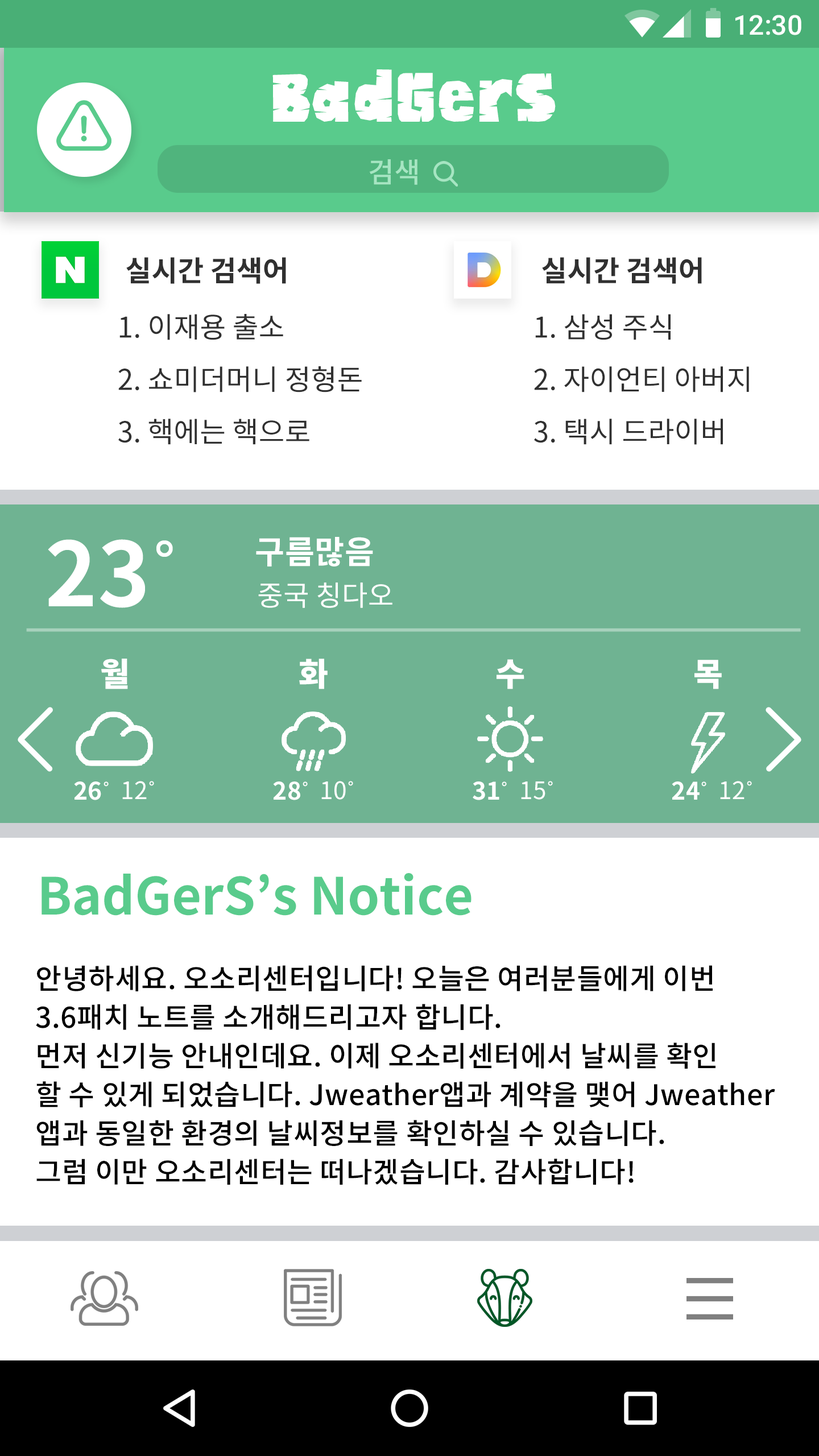
<style>
.page{position:relative;width:819px;height:1456px;background:#ffffff}
.page>*{position:absolute;margin:0}
.t1{font:27.3px "Roboto-Medium";color:#ffffff}
.t2{font:51.2px "CUTE_ANIMAL";color:#ffffff}
.t3{font:28.2px "NotoSansCJKkr-Medium";color:#a6e5c2}
.t4{font:28.4px "NotoSansCJKkr-Bold";color:#303030}
.t5{font:28.4px "NotoSansCJKkr-Regular";color:#303030}
.t6{font:88.5px "NotoSansCJKkr-Bold";letter-spacing:0.01em;color:#ffffff}
.t7{font:88.5px "Gulim";letter-spacing:0.01em;color:#ffffff}
.t8{font:32.2px "NotoSansCJKkr-Bold";letter-spacing:0.01em;color:#ffffff}
.t9{font:28.1px "NotoSansCJKkr-Regular";letter-spacing:0.01em;color:#ffffff}
.t10{font:32.2px "NotoSansCJKkr-Black";letter-spacing:0.01em;color:#ffffff}
.t11{font:24.1px "NotoSansCJKkr-Bold";letter-spacing:0.01em;color:#ffffff}
.t12{font:24.1px "Gulim";letter-spacing:0.01em;color:#ffffff}
.t13{font:24.1px "NotoSansCJKkr-Regular";letter-spacing:0.01em;color:#ffffff}
.t14{font:51.2px "NotoSansCJKkr-Bold";color:#59cb8c}
.t15{font:28.4px/38.7px "NotoSansCJKkr-Medium";letter-spacing:0.01em;color:#000000}
</style>
<div class="page">
<p class="t1" style="left:735px;top:15px;width:66px;height:20px">12:30</p>
<p class="t2" style="left:272px;top:69px;width:284px;height:53px">BadGerS</p>
<p class="t3" style="left:369px;top:159px;width:48px;height:26px">검색</p>
<p class="t4" style="left:126px;top:257px;width:160px;height:27px">실시간 검색어</p>
<p class="t4" style="left:542px;top:257px;width:160px;height:27px">실시간 검색어</p>
<p class="t5" style="left:119px;top:314px;width:164px;height:26px">1. 이재용 출소</p>
<p class="t5" style="left:535px;top:314px;width:136px;height:26px">1. 삼성 주식</p>
<p class="t5" style="left:118px;top:366px;width:244px;height:26px">2. 쇼미더머니 정형돈</p>
<p class="t5" style="left:534px;top:366px;width:215px;height:26px">2. 자이언티 아버지</p>
<p class="t5" style="left:118px;top:419px;width:191px;height:26px">3. 핵에는 핵으로</p>
<p class="t5" style="left:534px;top:419px;width:189px;height:26px">3. 택시 드라이버</p>
<p class="t6" style="left:48px;top:539px;width:125px;height:69px">23<span class="t7">˚</span></p>
<p class="t8" style="left:256px;top:537px;width:117px;height:29px">구름많음</p>
<p class="t9" style="left:258px;top:582px;width:134px;height:26px">중국 칭다오</p>
<p class="t10" style="left:101px;top:659px;width:27px;height:30px">월</p>
<p class="t10" style="left:299px;top:659px;width:29px;height:30px">화</p>
<p class="t10" style="left:497px;top:659px;width:27px;height:30px">수</p>
<p class="t10" style="left:694px;top:660px;width:28px;height:29px">목</p>
<p class="t11" style="left:74px;top:781px;width:35px;height:19px">26<span class="t12">˚</span></p>
<p class="t13" style="left:122px;top:781px;width:32px;height:18px">12<span class="t12">˚</span></p>
<p class="t11" style="left:273px;top:781px;width:35px;height:19px">28<span class="t12">˚</span></p>
<p class="t13" style="left:321px;top:781px;width:32px;height:19px">10<span class="t12">˚</span></p>
<p class="t11" style="left:473px;top:781px;width:34px;height:19px">31<span class="t12">˚</span></p>
<p class="t13" style="left:521px;top:781px;width:32px;height:19px">15<span class="t12">˚</span></p>
<p class="t11" style="left:672px;top:781px;width:34px;height:19px">24<span class="t12">˚</span></p>
<p class="t13" style="left:720px;top:781px;width:32px;height:18px">12<span class="t12">˚</span></p>
<p class="t14" style="left:42px;top:873px;width:429px;height:43px">BadGerS’s Notice</p>
<p class="t15" style="left:36px;top:965px;width:739px;height:220px">안녕하세요. 오소리센터입니다! 오늘은 여러분들에게 이번<br>3.6패치 노트를 소개해드리고자 합니다.<br>먼저 신기능 안내인데요. 이제 오소리센터에서 날씨를 확인<br>할 수 있게 되었습니다. Jweather앱과 계약을 맺어 Jweather<br>앱과 동일한 환경의 날씨정보를 확인하실 수 있습니다.<br>그럼 이만 오소리센터는 떠나겠습니다. 감사합니다!</p>
</div>
